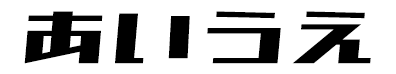
<style>
.page{position:relative;width:396px;height:74px;background:#ffffff}
.page>*{position:absolute;margin:0}
.t1{font:90px "851Gkktt";color:#000000}
</style>
<div class="page">
<p class="t1" style="left:24px;top:11px;width:347px;height:53px">あいうえ</p>
</div>
